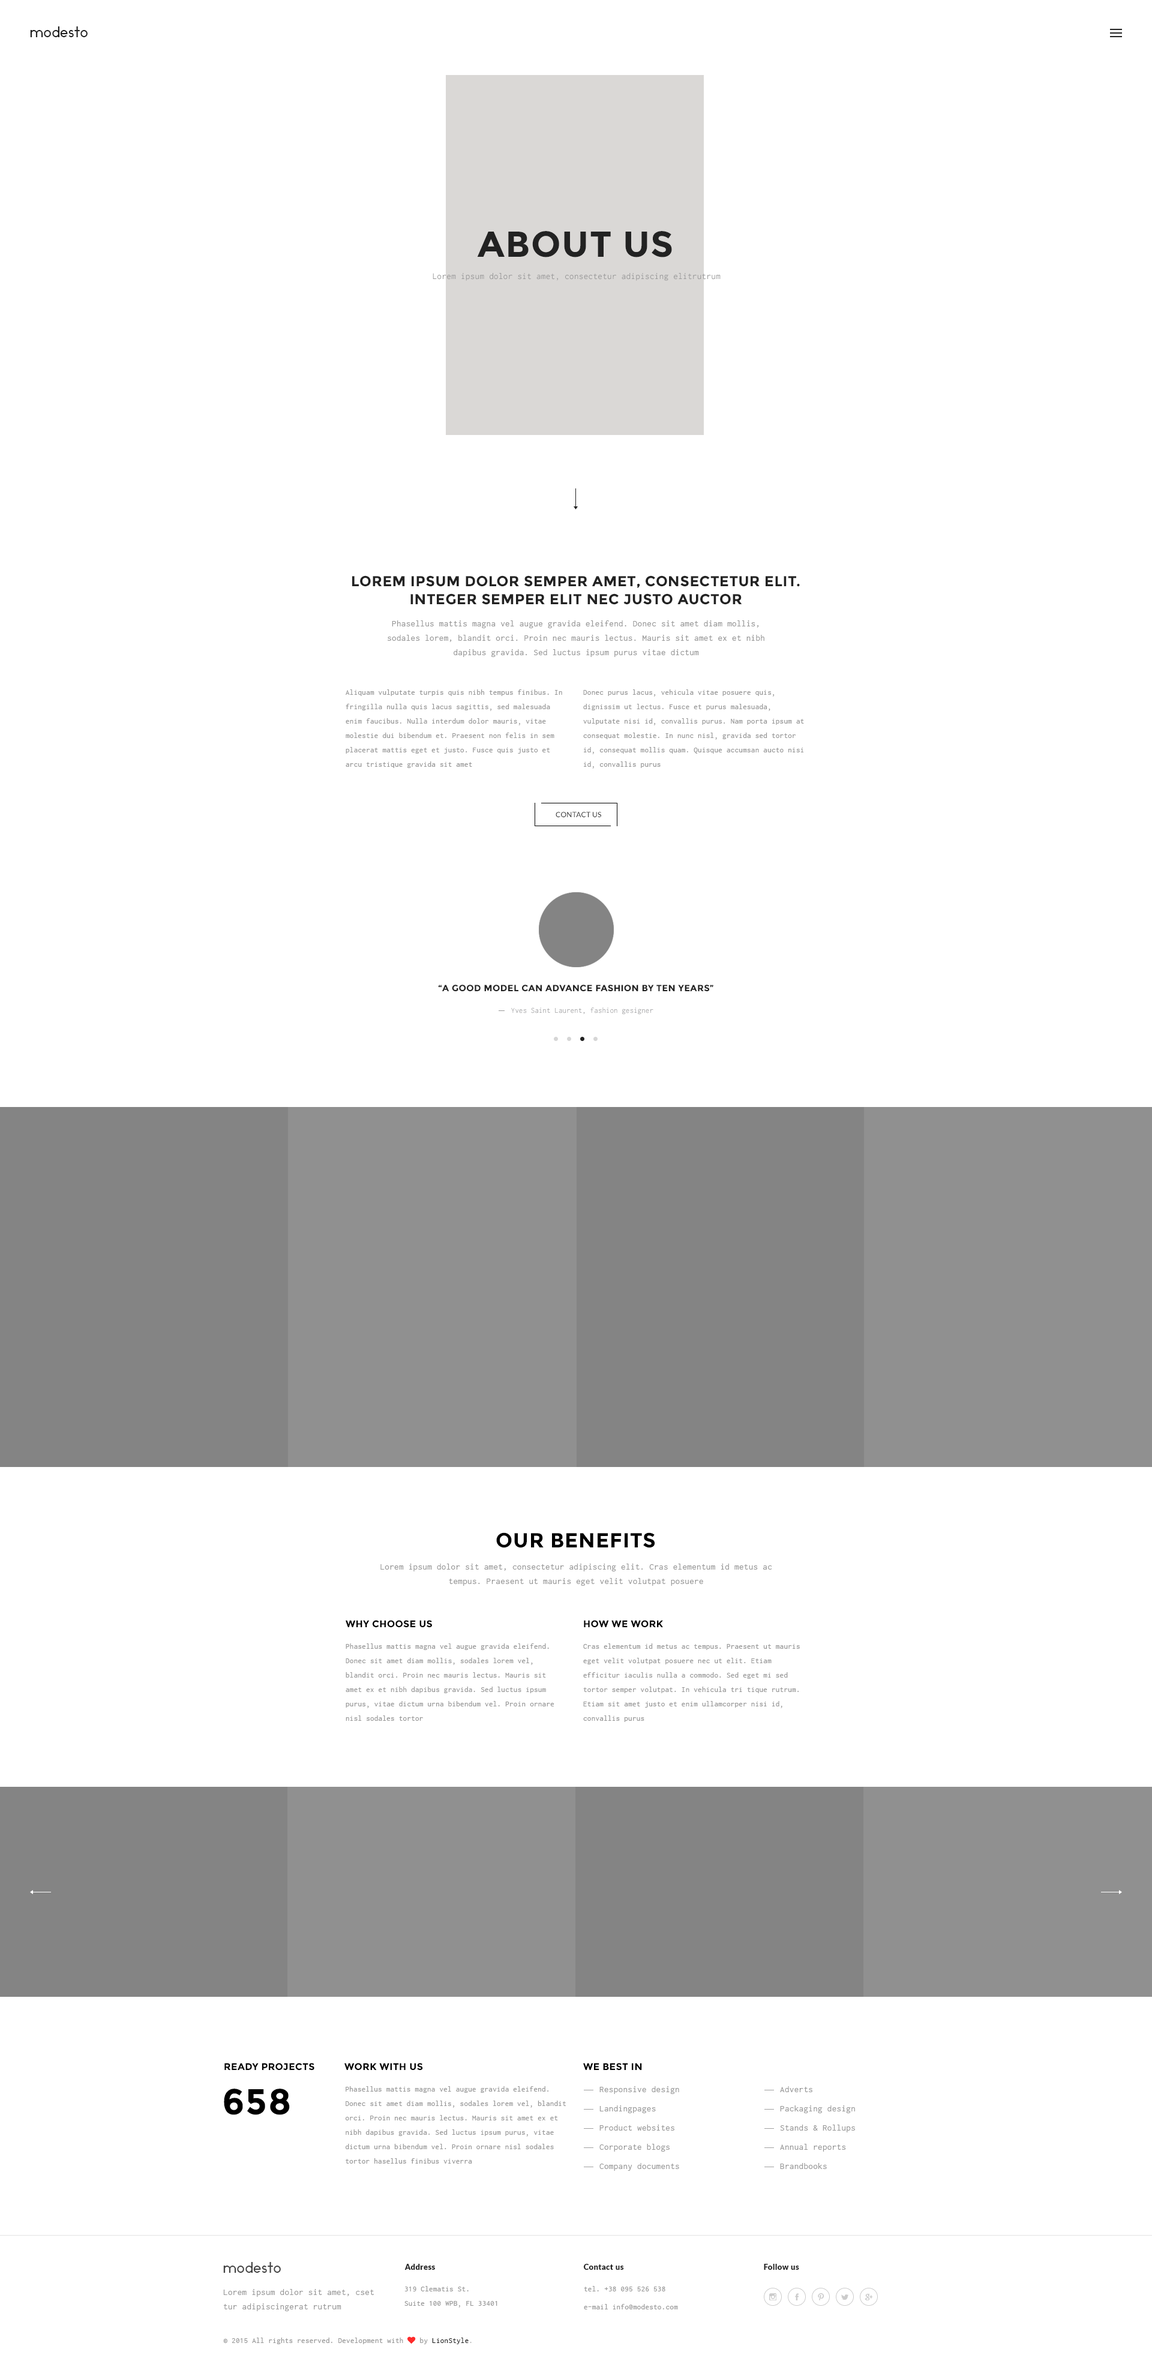
<style>
.page{position:relative;width:1152px;height:2373px;background:#ffffff}
.page>*{position:absolute;margin:0}
.t1{font:14.4px "Ikaros";letter-spacing:0.025em;color:#222222}
.t2{font:36px "Montserrat-Bold";letter-spacing:0.025em;color:#222222;text-transform:uppercase}
.t3{font:9px "Inconsolata";letter-spacing:0.025em;color:#989898}
.t4{font:14.4px/18px "Montserrat-Bold";letter-spacing:0.025em;color:#222222;text-transform:uppercase}
.t5{font:9px/14.4px "Inconsolata";letter-spacing:0.025em;color:#989898}
.t6{font:7.8px/14.4px "Inconsolata";letter-spacing:0.025em;color:#989898}
.t7{font:7.2px "Lato-Regular";letter-spacing:0.025em;color:#222222;text-transform:uppercase}
.t8{font:9px "Montserrat-Bold";letter-spacing:0.025em;color:#222222;text-transform:uppercase}
.t9{font:7.8px "Inconsolata";letter-spacing:0.025em;color:#98989a;scale:0.97 1}
.t10{font:20.4px "Montserrat-Bold";letter-spacing:0.025em;color:#000000;text-transform:uppercase}
.t11{font:9.6px "Montserrat-Bold";letter-spacing:0.025em;color:#000000;text-transform:uppercase}
.t12{font:36px "Montserrat-Bold";letter-spacing:0.025em;color:#000000;text-transform:uppercase}
.t13{font:9px/19.2px "Inconsolata";letter-spacing:0.025em;color:#989898}
.t14{font:14.4px "Ikaros";letter-spacing:0.025em;color:#444444}
.t15{font:7.8px "Lato-Black";letter-spacing:0.025em;color:#222222}
.t16{font:7.8px/18px "Inconsolata";letter-spacing:0.025em;color:#989898}
.t17{font:7.8px "Inconsolata";letter-spacing:0.025em;color:#989898}
.t18{font:7.8px "FontAwesome";letter-spacing:0.025em;color:#fe2b2b}
.t19{font:7.8px "Inconsolata";letter-spacing:0.025em;color:#222222}
.t20{font:7.8px "Inconsolata";letter-spacing:0.025em;color:#b5b5b5}
</style>
<div class="page">
<p class="t1" style="left:30px;top:26px;width:58px;height:11px">modesto</p>
<p class="t2" style="left:477px;top:231px;width:195px;height:26px">about us</p>
<p class="t3" style="left:433px;top:273px;width:288px;height:8px">Lorem ipsum dolor sit amet, consectetur adipiscing elitrutrum</p>
<p class="t4" style="left:352px;top:575px;width:448px;height:30px;text-align:center">Lorem ipsum dolor semper amet, consectetur elit. Integer semper elit nec justo auctor laciniaCurabitur eleifend, tortor eu eleifend egestas</p>
<p class="t5" style="left:388px;top:620px;width:376px;height:37px;text-align:center">Phasellus mattis magna vel augue gravida eleifend. Donec sit amet diam mollis, sodales lorem, blandit orci. Proin nec mauris lectus. Mauris sit amet ex et nibh dapibus gravida. Sed luctus ipsum purus vitae dictum</p>
<p class="t6" style="left:346px;top:689px;width:216px;height:79px">Aliquam vulputate turpis quis nibh tempus finibus. In fringilla nulla quis lacus sagittis, sed malesuada enim faucibus. Nulla interdum dolor mauris, vitae molestie dui bibendum et. Praesent non felis in sem placerat mattis eget et justo. Fusce quis justo et arcu tristique gravida sit amet</p>
<p class="t6" style="left:583px;top:689px;width:221px;height:80px">Donec purus lacus, vehicula vitae posuere quis, dignissim ut lectus. Fusce et purus malesuada, vulputate nisi id, convallis purus. Nam porta ipsum at consequat molestie. In nunc nisl, gravida sed tortor id, consequat mollis quam. Quisque accumsan aucto nisi id, convallis purus</p>
<p class="t7" style="left:556px;top:812px;width:45px;height:5px">contact us</p>
<p class="t8" style="left:438px;top:985px;width:275px;height:6px">“A good model can advance fashion by ten years”</p>
<p class="t9" style="left:511px;top:1007px;width:142px;height:8px">Yves Saint Laurent, fashion gesigner</p>
<p class="t10" style="left:496px;top:1532px;width:159px;height:16px">our benefits</p>
<p class="t5" style="left:380px;top:1564px;width:392px;height:22px;text-align:center">Lorem ipsum dolor sit amet, consectetur adipiscing elit. Cras elementum id metus ac tempus. Praesent ut mauris eget velit volutpat posuere</p>
<p class="t11" style="left:346px;top:1620px;width:86px;height:8px">why choose us</p>
<p class="t11" style="left:584px;top:1620px;width:79px;height:7px">how we work</p>
<p class="t6" style="left:346px;top:1643px;width:208px;height:78px">Phasellus mattis magna vel augue gravida eleifend. Donec sit amet diam mollis, sodales lorem vel, blandit orci. Proin nec mauris lectus. Mauris sit amet ex et nibh dapibus gravida. Sed luctus ipsum purus, vitae dictum urna bibendum vel. Proin ornare nisl sodales tortor</p>
<p class="t6" style="left:583px;top:1643px;width:217px;height:79px">Cras elementum id metus ac tempus. Praesent ut mauris eget velit volutpat posuere nec ut elit. Etiam efficitur iaculis nulla a commodo. Sed eget mi sed tortor semper volutpat. In vehicula tri tique rutrum. Etiam sit amet justo et enim ullamcorper nisi id, convallis purus</p>
<p class="t11" style="left:224px;top:2063px;width:90px;height:8px">ready projects</p>
<p class="t11" style="left:344px;top:2063px;width:79px;height:8px">work with us</p>
<p class="t11" style="left:583px;top:2063px;width:59px;height:8px">we best in</p>
<p class="t12" style="left:224px;top:2089px;width:66px;height:26px">658</p>
<p class="t6" style="left:345px;top:2086px;width:221px;height:78px">Phasellus mattis magna vel augue gravida eleifend. Donec sit amet diam mollis, sodales lorem vel, blandit orci. Proin nec mauris lectus. Mauris sit amet ex et nibh dapibus gravida. Sed luctus ipsum purus, vitae dictum urna bibendum vel. Proin ornare nisl sodales tortor hasellus finibus viverra</p>
<p class="t13" style="left:599px;top:2086px;width:80px;height:85px">Responsive design<br>Landingpages<br>Product websites<br>Corporate blogs<br>Company documents</p>
<p class="t13" style="left:780px;top:2086px;width:75px;height:83px">Adverts<br>Packaging design<br>Stands &amp; Rollups<br>Annual reports<br>Brandbooks</p>
<p class="t14" style="left:223px;top:2262px;width:58px;height:11px">modesto</p>
<p class="t15" style="left:404px;top:2264px;width:31px;height:6px">Address</p>
<p class="t15" style="left:583px;top:2264px;width:41px;height:6px">Contact us</p>
<p class="t15" style="left:764px;top:2264px;width:35px;height:6px">Follow us</p>
<p class="t6" style="left:404px;top:2286px;width:93px;height:22px">319 Clematis St.<br>Suite 100 WPB, FL 33401</p>
<p class="t16" style="left:584px;top:2286px;width:94px;height:23px">tel. +38 095 526 538<br>e-mail info@modesto.com</p>
<p class="t5" style="left:223px;top:2289px;width:151px;height:22px">Lorem ipsum dolor sit amet, cset tur adipiscingerat rutrum</p>
<p class="t17" style="left:223px;top:2336px;width:249px;height:8px">© 2015 All rights reserved. Development with <span class="t18">♥ </span>by<span class="t19"> LionStyle</span><span class="t20">.</span></p>
</div>
